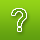
<style>
.page{position:relative;width:40px;height:40px}
.page>*{position:absolute;margin:0}
.t1{font:30px "MicrosoftSansSerif";color:#5f9d10}
</style>
<div class="page">
<p class="t1" style="left:12px;top:9px;width:14px;height:22px">?</p>
</div>
